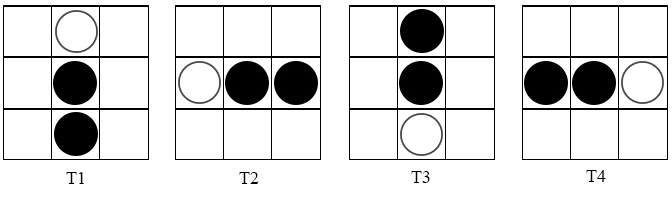
<style>
.page{position:relative;width:672px;height:200px;background:#ffffff}
.page>*{position:absolute;margin:0}
.t1{font:18px "TimesNewRomanPSMT";color:#000000}
</style>
<div class="page">
<p class="t1" style="left:66px;top:172px;width:18px;height:12px">T1</p>
<p class="t1" style="left:239px;top:172px;width:20px;height:12px">T2</p>
<p class="t1" style="left:411px;top:171px;width:19px;height:12px">T3</p>
<p class="t1" style="left:586px;top:170px;width:20px;height:12px">T4</p>
</div>
